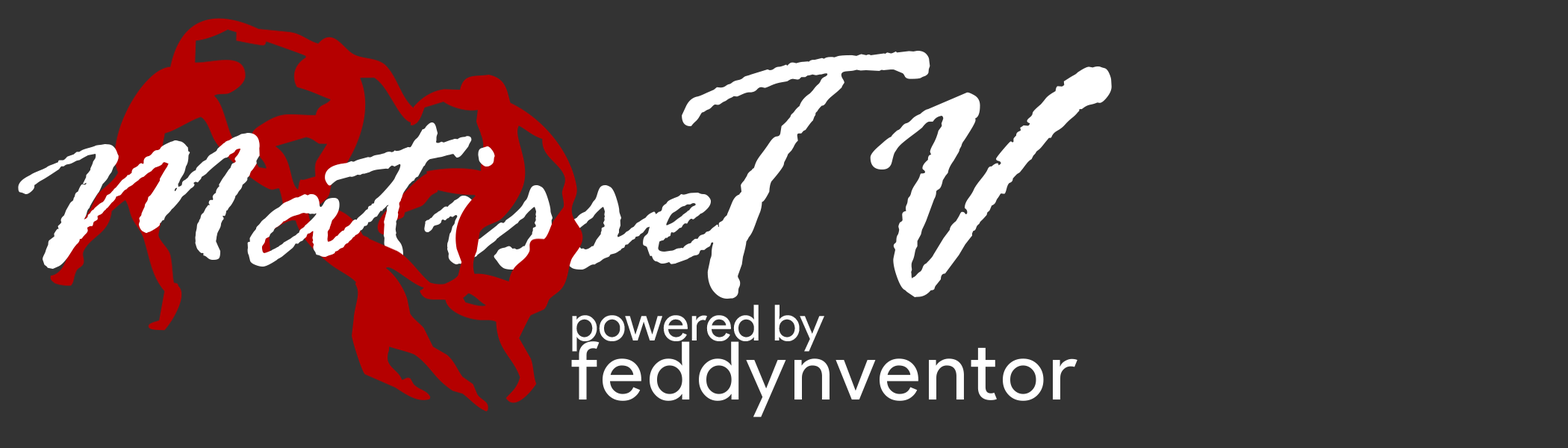
<style>
.page{position:relative;width:1568px;height:448px;background:#333333}
.page>*{position:absolute;margin:0}
.t1{font:364px "RageItalic";color:#ffffff}
.t2{font:255.1px "RageItalic";color:#ffffff}
.t3{font:80.9px/59.1px "ProductSans-Regular";letter-spacing:0.04em;color:#ffffff}
.t4{font:49.8px/59.1px "ProductSans-Regular";color:#ffffff}
</style>
<div class="page">
<p class="t1" style="left:682px;top:51px;width:430px;height:248px">TV</p>
<p class="t2" style="left:18px;top:122px;width:715px;height:148px">Matisse</p>
<p class="t3" style="left:571px;top:305px;width:506px;height:112px"><span class="t4">powered by<br></span>feddynventor</p>
</div>
